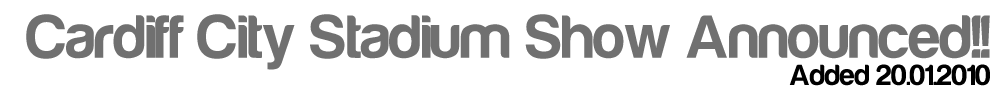
<style>
.page{position:relative;width:1000px;height:100px;background:#ffffff}
.page>*{position:absolute;margin:0}
.t1{font:63px "Harabara-Bold";color:#707070}
.t2{font:30px "Harabara-Bold";color:#000000}
</style>
<div class="page">
<p class="t1" style="left:26px;top:14px;width:964px;height:56px">Cardiff City Stadium Show Announced!!</p>
<p class="t2" style="left:789px;top:64px;width:201px;height:22px">Added 20.01.2010</p>
</div>
